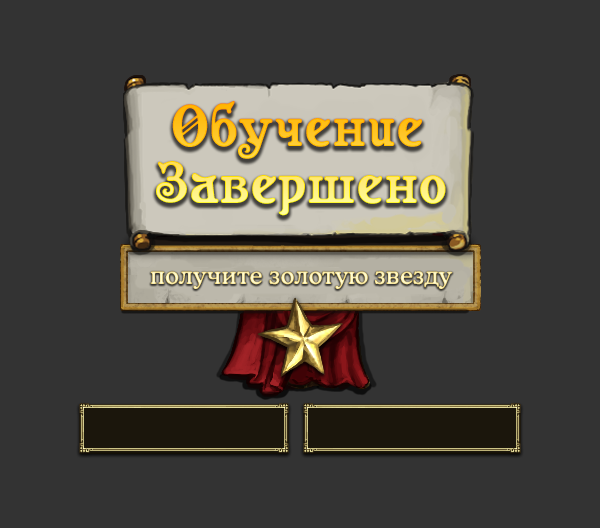
<style>
.page{position:relative;width:600px;height:528px;background:#333333}
.page>*{position:absolute;margin:0}
.t1{font:58px/57px "Casanova";letter-spacing:0.03em}
.t2{font:36px/57px "Casanova";letter-spacing:0.03em}
.t3{font:24.4px "CooperMediumCBT";letter-spacing:0.01em}
</style>
<div class="page">
<p class="t1" style="left:156px;top:100px;width:290px;height:116px;text-align:center"><span class="t2"> </span>Обучение <br>Завершено</p>
<p class="t3" style="left:150px;top:271px;width:303px;height:18px">получите золотую звезду</p>
</div>
